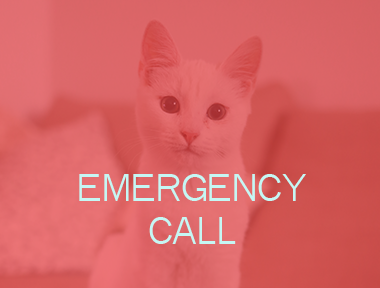
<style>
.page{position:relative;width:380px;height:288px}
.page>*{position:absolute;margin:0}
.t1{font:36px "QuickTypeII";color:#c5f7f4}
</style>
<div class="page">
<p class="t1" style="left:79px;top:174px;width:227px;height:70px;text-align:center">EMERGENCY<br>CALL</p>
</div>
